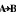
<style>
.page{position:relative;width:16px;height:16px;background:#ffffff}
.page>*{position:absolute;margin:0}
.t1{font:11px "Times-Bold";color:#000000}
</style>
<div class="page">
<p class="t1" style="left:0px;top:4px;width:7px;height:8px">A</p>
<p class="t1" style="left:10px;top:4px;width:7px;height:8px">B</p>
</div>
